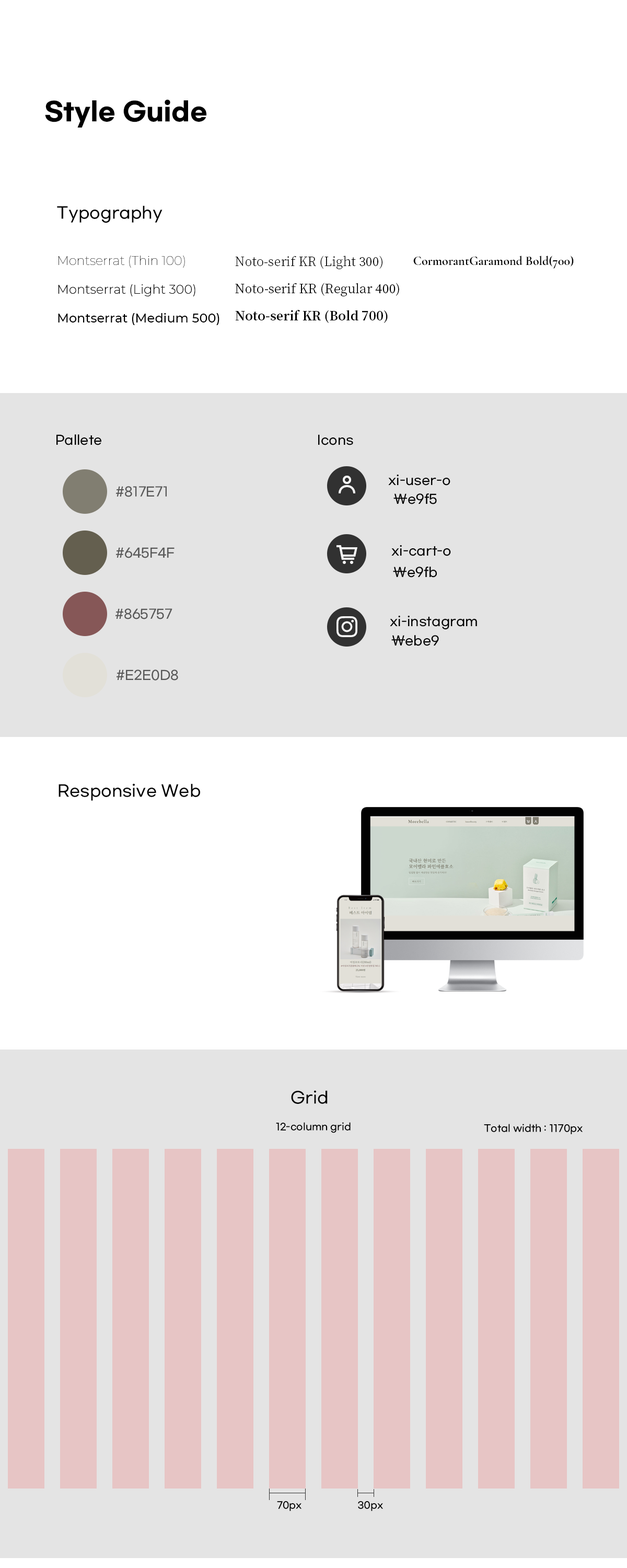
<style>
.page{position:relative;width:627px;height:1568px;background:#ffffff}
.page>*{position:absolute;margin:0}
.t1{font:25.1px "GmarketSansBold";color:#000000}
.t2{font:15.7px "GmarketSansMedium";color:#000000}
.t3{font:12.5px "Montserrat-Thin";color:#000000}
.t4{font:12.5px "NotoSerifKR-Light";color:#000000}
.t5{font:12.5px "CormorantGaramond-Bold";color:#000000}
.t6{font:12.5px "Montserrat-Light";color:#000000}
.t7{font:12.5px "NotoSerifKR-Regular";color:#000000}
.t8{font:12.5px "Montserrat-Medium";color:#000000}
.t9{font:12.5px "NotoSerifKR-Bold";color:#000000}
.t10{font:12.5px "GmarketSansMedium";color:#000000}
.t11{font:12.5px "GmarketSansMedium";color:#575757}
.t12{font:9.4px "GmarketSansMedium";color:#000000}
.t13{font:9.2px "GmarketSansMedium";color:#000000}
</style>
<div class="page">
<p class="t1" style="left:45px;top:99px;width:161px;height:29px">Style Guide</p>
<p class="t2" style="left:57px;top:205px;width:106px;height:18px">Typography</p>
<p class="t3" style="left:59px;top:256px;width:126px;height:12px">Montserrat (Thin 100)</p>
<p class="t4" style="left:235px;top:256px;width:148px;height:13px">Noto-serif KR (Light 300)</p>
<p class="t5" style="left:413px;top:256px;width:161px;height:13px">CormorantGaramond Bold(700)</p>
<p class="t6" style="left:58px;top:284px;width:137px;height:12px">Montserrat (Light 300)</p>
<p class="t7" style="left:235px;top:283px;width:164px;height:13px">Noto-serif KR (Regular 400)</p>
<p class="t8" style="left:58px;top:313px;width:162px;height:12px">Montserrat (Medium 500)</p>
<p class="t9" style="left:235px;top:310px;width:153px;height:13px">Noto-serif KR (Bold 700)</p>
<p class="t10" style="left:56px;top:434px;width:45px;height:11px">Pallete</p>
<p class="t10" style="left:318px;top:434px;width:35px;height:11px">Icons</p>
<p class="t10" style="left:388px;top:475px;width:63px;height:11px">xi-user-o</p>
<p class="t11" style="left:116px;top:486px;width:51px;height:11px">#817E71</p>
<p class="t10" style="left:394px;top:493px;width:43px;height:11px">\e9f5</p>
<p class="t10" style="left:391px;top:545px;width:60px;height:11px">xi-cart-o</p>
<p class="t11" style="left:116px;top:547px;width:59px;height:11px">#645F4F</p>
<p class="t10" style="left:393px;top:567px;width:44px;height:11px">\e9fb</p>
<p class="t11" style="left:116px;top:608px;width:56px;height:11px">#865757</p>
<p class="t10" style="left:390px;top:616px;width:87px;height:14px">xi-instagram</p>
<p class="t10" style="left:391px;top:635px;width:48px;height:11px">\ebe9</p>
<p class="t11" style="left:117px;top:670px;width:61px;height:11px">#E2E0D8</p>
<p class="t2" style="left:59px;top:783px;width:141px;height:18px">Responsive Web</p>
<p class="t2" style="left:291px;top:1090px;width:37px;height:14px">Grid</p>
<p class="t12" style="left:276px;top:1122px;width:75px;height:11px">12-column grid</p>
<p class="t12" style="left:484px;top:1124px;width:99px;height:10px">Total width : 1170px</p>
<p class="t13" style="left:277px;top:1501px;width:25px;height:10px">70px</p>
<p class="t13" style="left:358px;top:1501px;width:25px;height:10px">30px</p>
</div>
